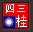
<style>
.page{position:relative;width:33px;height:32px;background:#f20000}
.page>*{position:absolute;margin:0}
.t1{font:10.4px "SimSun";color:#ffffff}
.t2{font:11.7px "SimSun";color:#ffffff}
</style>
<div class="page">
<p class="t1" style="left:6px;top:4px;width:19px;height:9px">四三</p>
<p class="t2" style="left:16px;top:15px;width:11px;height:12px">桂</p>
</div>
